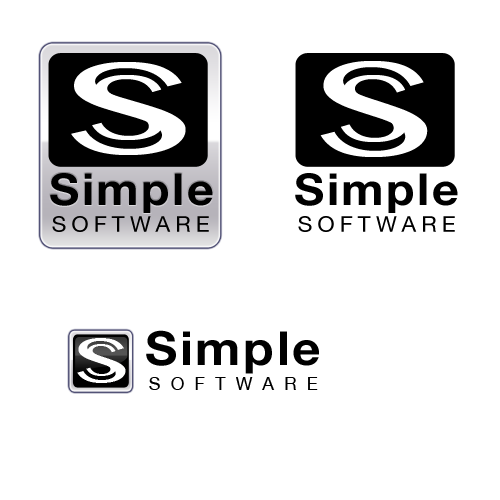
<style>
.page{position:relative;width:500px;height:500px;background:#ffffff}
.page>*{position:absolute;margin:0}
.t1{font:130.2px "BanglaMN";color:#ffffff;scale:1.81 1}
.t2{font:134.4px "BanglaMN";color:#ffffff;scale:1.63 1}
.t3{font:92.4px "BanglaMN";color:#ffffff;scale:1.59 1}
.t4{font:95.3px "BanglaMN";color:#ffffff;scale:1.43 1}
.t5{font:44px "HelveticaNeue-Bold";letter-spacing:0.055em;color:#000000;scale:1.06 1}
.t6{font:21.6px "HelveticaNeue";letter-spacing:0.23em;color:#000000;scale:1.04 1}
.t7{font:63.6px "BanglaMN";color:#ffffff;scale:1.57 1}
.t8{font:47px "HelveticaNeue-Bold";letter-spacing:0.055em;color:#000000;scale:1.06 1}
.t9{font:45.1px "BanglaMN";color:#ffffff;scale:1.38 1}
.t10{font:18px "HelveticaNeue";letter-spacing:0.57em;color:#000000}
</style>
<div class="page">
<p class="t1" style="left:71px;top:62px;width:115px;height:93px">S</p>
<p class="t2" style="left:320px;top:61px;width:108px;height:96px">S</p>
<p class="t3" style="left:92px;top:75px;width:72px;height:65px">S</p>
<p class="t4" style="left:341px;top:75px;width:67px;height:67px">S</p>
<p class="t5" style="left:50px;top:173px;width:163px;height:40px">Simple</p>
<p class="t5" style="left:295px;top:173px;width:163px;height:40px">Simple</p>
<p class="t6" style="left:52px;top:216px;width:157px;height:16px">SOFTWARE</p>
<p class="t6" style="left:298px;top:216px;width:157px;height:16px">SOFTWARE</p>
<p class="t7" style="left:77px;top:338px;width:49px;height:45px">S</p>
<p class="t8" style="left:146px;top:330px;width:173px;height:44px">Simple</p>
<p class="t9" style="left:86px;top:344px;width:31px;height:32px">S</p>
<p class="t10" style="left:149px;top:377px;width:169px;height:13px">SOFTWARE</p>
</div>
